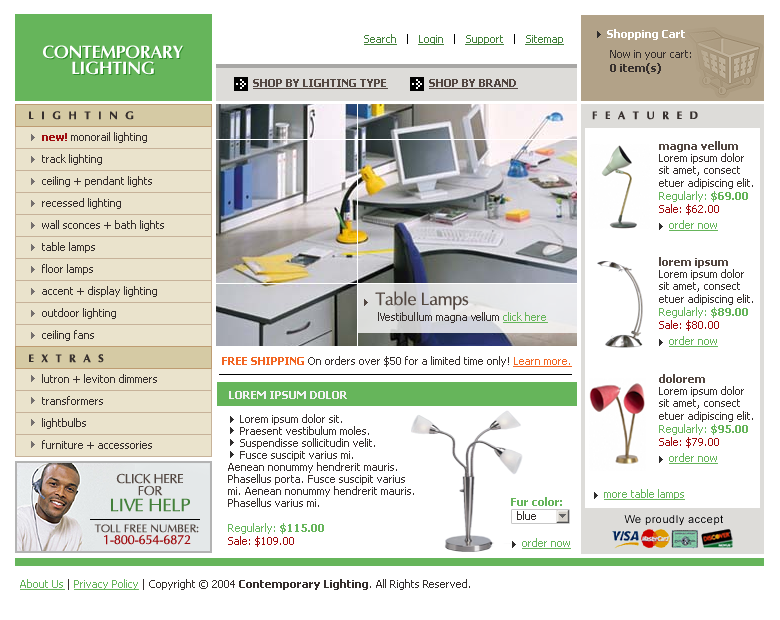
<style>
.page{position:relative;width:780px;height:620px;background:#ffffff}
.page>*{position:absolute;margin:0}
.t1{font:11px "Tahoma-Bold";color:#ffffff}
.t2{font:11px "Tahoma";color:#42803a;text-decoration:underline}
.t3{font:9px "Tahoma";color:#000000}
.t4{font:18px/16px "AGOptimaBold";letter-spacing:-0.025em;color:#ffffff;text-transform:uppercase}
.t5{font:11px/14px "Tahoma";color:#362f2d}
.t6{font:11px/14px "Tahoma-Bold";color:#362f2d}
.t7{font:11px "Tahoma-Bold";color:#534741;text-transform:uppercase;text-decoration:underline}
.t8{font:11px "AGOptimaBold";letter-spacing:0.68em;color:#362f2d;text-transform:uppercase}
.t9{font:11px/22px "Tahoma";color:#362f2d}
.t10{font:11px/22px "Tahoma-Bold";color:#9e0b0e}
.t11{font:11px/12px "Tahoma";color:#362f2d}
.t12{font:11px/13px "Tahoma-Bold";color:#534741}
.t13{font:11px/13px "Tahoma";color:#66b55b}
.t14{font:11px/13px "Tahoma-Bold";color:#66b55b}
.t15{font:11px/13px "Tahoma";color:#9e0b0e}
.t16{font:11px "Tahoma";color:#66b55b;text-decoration:underline}
.t17{font:11px "Tahoma";color:#362f2d}
.t18{font:18px "Optima";letter-spacing:-0.025em;color:#534741}
.t19{font:11px "Tahoma-Bold";color:#f26522;text-transform:uppercase}
.t20{font:11px "Tahoma";color:#f26522;text-decoration:underline}
.t21{font:13px/12px "Optima";letter-spacing:-0.025em;color:#534741;text-transform:uppercase}
.t22{font:18px/16px "Optima";letter-spacing:-0.025em;color:#43803a;text-transform:uppercase;font-weight:bold}
.t23{font:11px/14px "Tahoma-Bold";color:#66b55b}
.t24{font:11px/12px "Optima";letter-spacing:-0.025em;color:#534741;text-transform:uppercase;font-weight:bold}
.t25{font:13px/12px "Optima";letter-spacing:-0.025em;color:#9e0b0e;text-transform:uppercase}
.t26{font:11px "Tahoma-Bold";color:#362f2d}
</style>
<div class="page">
<p class="t1" style="left:607px;top:29px;width:78px;height:11px">Shopping Cart</p>
<p class="t2" style="left:364px;top:34px;width:200px;height:11px">Search   <span class="t3">|   </span>Login   <span class="t3">|   </span>Support   <span class="t3">|   </span>Sitemap</p>
<p class="t4" style="left:43px;top:45px;width:140px;height:30px;text-align:center">Contemporary<br>Lighting</p>
<p class="t5" style="left:610px;top:50px;width:81px;height:24px">Now in your cart:<br><span class="t6">0 item(s)</span></p>
<p class="t7" style="left:253px;top:79px;width:135px;height:10px">shop by lighting type</p>
<p class="t7" style="left:429px;top:79px;width:89px;height:10px">shop by brand</p>
<p class="t8" style="left:29px;top:111px;width:105px;height:9px">lighting</p>
<p class="t8" style="left:592px;top:111px;width:106px;height:9px">featured</p>
<p class="t9" style="left:42px;top:132px;width:122px;height:209px"><span class="t10">new!</span> monorail lighting<br>track lighting<br>ceiling + pendant lights<br>recessed lighting<br>wall sconces + bath lights<br>table lamps<br>floor lamps<br>accent + display lighting<br>outdoor lighting<br>ceiling fans</p>
<p class="t11" style="left:659px;top:142px;width:98px;height:111px"><span class="t12">magna vellum<br></span>Lorem ipsum dolor sit amet, consect etuer adipiscing elit.<br><span class="t13">Regularly:</span><span class="t14"> $69.00<br></span><span class="t15">Sale: $62.00</span></p>
<p class="t16" style="left:669px;top:220px;width:49px;height:11px"><span class="t17"><br><br><br><br><br><br><br><br><br>    </span>order now</p>
<p class="t11" style="left:659px;top:257px;width:94px;height:74px"><span class="t12">lorem ipsum<br></span>Lorem ipsum dolor sit amet, consect etuer adipiscing elit.<br><span class="t13">Regularly:</span><span class="t14"> $89.00<br></span><span class="t15">Sale: $80.00</span></p>
<p class="t18" style="left:375px;top:291px;width:94px;height:19px">Table Lamps</p>
<p class="t17" style="left:378px;top:312px;width:170px;height:11px">lVestibullum magna vellum <span class="t16">click here</span></p>
<p class="t16" style="left:669px;top:336px;width:49px;height:11px"><span class="t17"><br><br><br><br><br><br><br><br><br>    </span>order now</p>
<p class="t8" style="left:29px;top:354px;width:75px;height:9px">extras</p>
<p class="t17" style="left:222px;top:356px;width:350px;height:11px"><span class="t19">free shipping </span>On orders over $50 for a limited time only! <span class="t20">Learn more.</span></p>
<p class="t9" style="left:42px;top:374px;width:115px;height:75px">lutron + leviton dimmers<br>transformers<br>lightbulbs<br>furniture + accessories</p>
<p class="t11" style="left:659px;top:374px;width:94px;height:74px"><span class="t12">dolorem<br></span>Lorem ipsum dolor sit amet, consect etuer adipiscing elit.<br><span class="t13">Regularly:</span><span class="t14"> $95.00<br></span><span class="t15">Sale: $79.00</span></p>
<p class="t11" style="left:228px;top:415px;width:189px;height:145px">Lorem ipsum dolor sit. <br>    Praesent vestibulum moles.<br>    Suspendisse sollicitudin velit.<br>    Fusce suscipit varius mi.<br>Aenean nonummy hendrerit mauris. Phasellus porta. Fusce suscipit varius mi. Aenean nonummy hendrerit mauris. Phasellus varius mi. <br><br><span class="t13">Regularly:</span><span class="t14"> $115.00<br></span><span class="t15">Sale: $109.00</span></p>
<p class="t16" style="left:669px;top:453px;width:49px;height:11px"><span class="t17"><br><br><br><br><br><br><br><br><br>    </span>order now</p>
<p class="t21" style="left:111px;top:473px;width:79px;height:39px;text-align:center">Click here<br>for<br><span class="t22">live help</span></p>
<p class="t23" style="left:511px;top:498px;width:109px;height:28px">Fur color:<br>  <span class="t5">blue</span></p>
<p class="t24" style="left:94px;top:524px;width:105px;height:21px;text-align:center">toll free number:<br><span class="t25">1-800-654-6872</span></p>
<p class="t17" style="left:20px;top:579px;width:450px;height:11px"><span class="t16">About Us</span> | <span class="t16">Privacy Policy</span> | Copyright © 2004 <span class="t26">Contemporary Lighting</span>. All Rights Reserved.</p>
</div>
